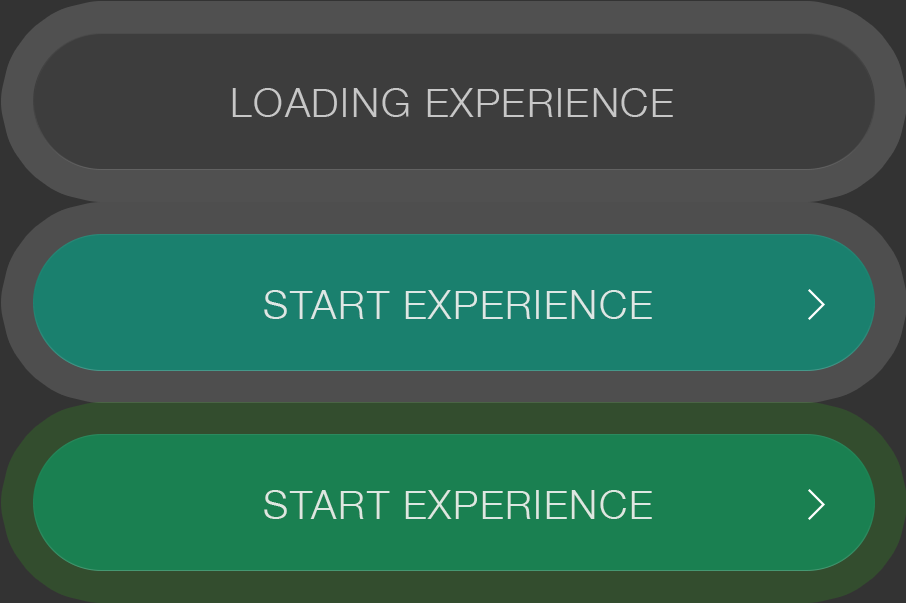
<style>
.page{position:relative;width:906px;height:603px}
.page>*{position:absolute;margin:0}
.t1{font:40px "HelveticaNeue-Light";letter-spacing:0.04em;color:#c7c7c7;text-transform:uppercase}
.t2{font:40px "HelveticaNeue-Light";letter-spacing:0.04em;color:#dde7e5;text-transform:uppercase}
.t3{font:40px "HelveticaNeue-Light";letter-spacing:0.04em;color:#dde7e1;text-transform:uppercase}
</style>
<div class="page">
<p class="t1" style="left:232px;top:88px;width:441px;height:29px">LOADING expErience</p>
<p class="t2" style="left:264px;top:290px;width:388px;height:29px">Start expErience</p>
<p class="t3" style="left:264px;top:490px;width:388px;height:29px">Start expErience</p>
</div>
